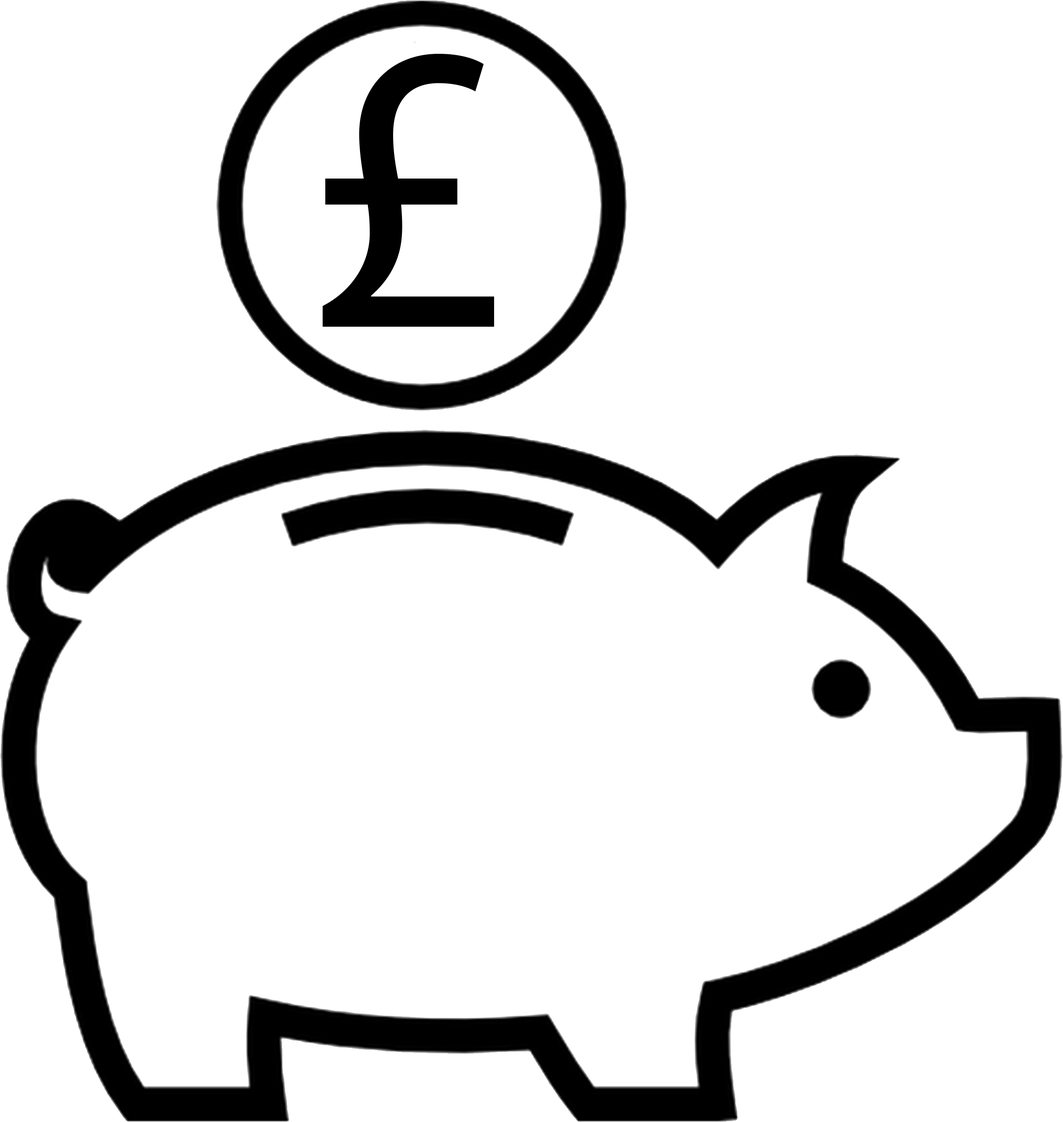
<style>
.page{position:relative;width:1063px;height:1122px;background:#ffffff}
.page>*{position:absolute;margin:0}
.t1{font:413.2px "MyriadPro-Regular";color:#000000}
</style>
<div class="page">
<p class="t1" style="left:323px;top:54px;width:172px;height:273px">£</p>
</div>
